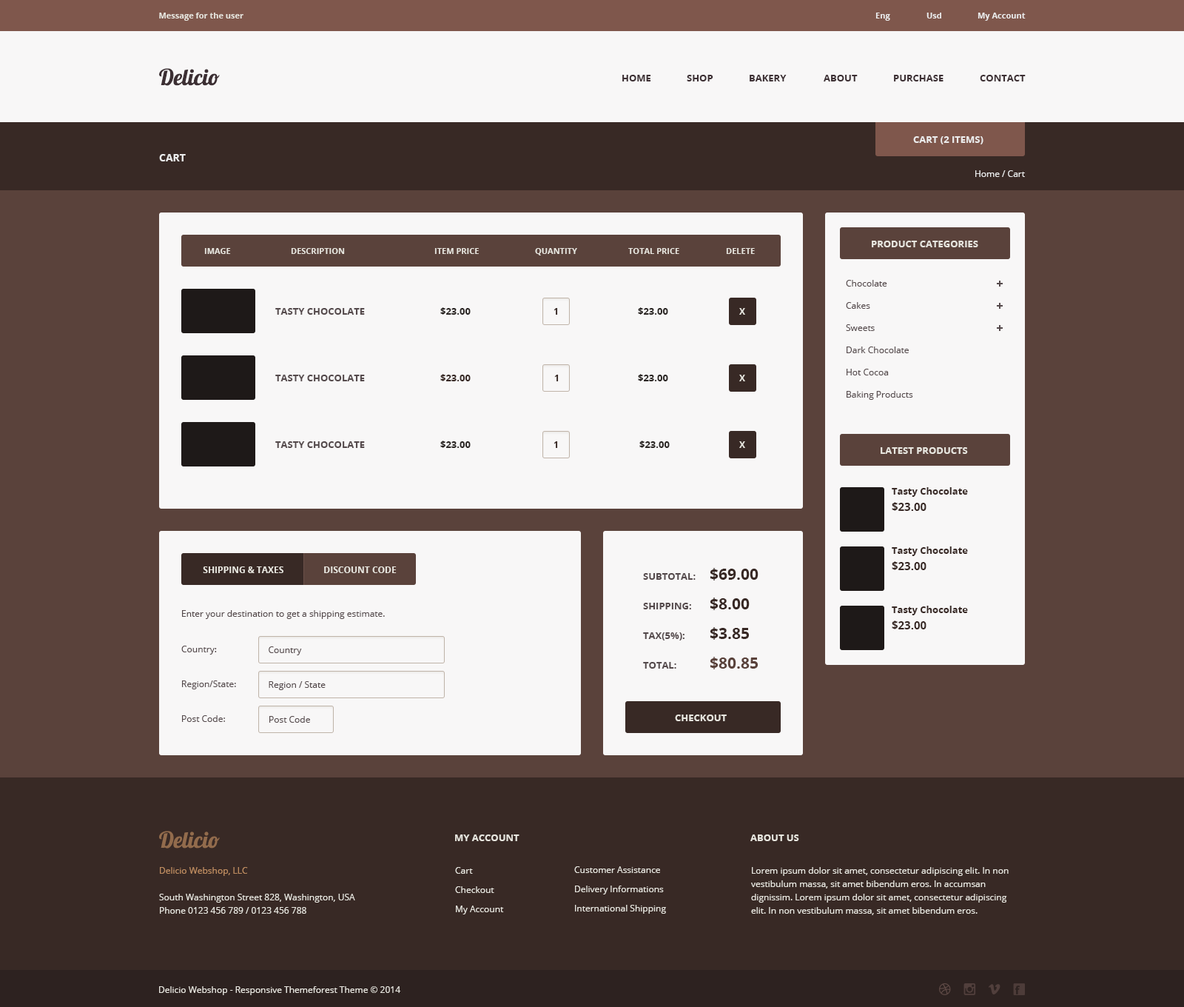
<style>
.page{position:relative;width:1184px;height:1007px;background:#f8f7f7}
.page>*{position:absolute;margin:0}
.t1{font:8.1px "OpenSans-Bold";color:#e7e5de}
.t2{font:8.1px "OpenSans-Bold";color:#ebebeb}
.t3{font:22.2px "Lobster1.4";color:#3c2f33}
.t4{font:9.6px "OpenSans-Bold";color:#3c2f33}
.t5{font:9.6px "OpenSans-Bold";color:#ebebeb}
.t6{font:10.4px "OpenSans-Bold";color:#ebebeb}
.t7{font:8.9px "OpenSans";color:#ebebeb}
.t8{font:9.6px "OpenSans-Bold";color:#e7e5de}
.t9{font:8.9px/22.2px "OpenSans";color:#554a4c}
.t10{font:9.6px "OpenSans-Bold";color:#554a4c}
.t11{font:9.6px "OpenSans-Bold";color:#2a2523}
.t12{font:8.9px "OpenSans-Bold";color:#382925}
.t13{font:8.9px "OpenSans-Bold";color:#e7e5de}
.t14{font:9.6px "OpenSans-Bold";color:#382925}
.t15{font:11.1px "OpenSans-Bold";color:#382925}
.t16{font:15.5px "OpenSans-Bold";color:#382925}
.t17{font:8.9px "OpenSans";color:#554a4c}
.t18{font:8.9px/34.8px "OpenSans";color:#554a4c}
.t19{font:15.5px "OpenSans-Bold";color:#5a423b}
.t20{font:22.2px "Lobster1.4";color:#926b4c}
.t21{font:8.9px/13.3px "OpenSans";color:#e7e5de}
.t22{font:8.9px/13.3px "OpenSans";color:#be8c60}
.t23{font:8.9px/19.2px "OpenSans";color:#e7e5de}
.t24{font:8.9px "OpenSans";color:#e7e5de}
</style>
<div class="page">
<p class="t1" style="left:159px;top:13px;width:85px;height:8px">Message for the user</p>
<p class="t2" style="left:876px;top:13px;width:15px;height:8px">Eng</p>
<p class="t2" style="left:927px;top:13px;width:15px;height:6px">Usd</p>
<p class="t2" style="left:978px;top:13px;width:48px;height:8px">My Account</p>
<p class="t3" style="left:159px;top:68px;width:61px;height:18px">Delicio</p>
<p class="t4" style="left:623px;top:75px;width:28px;height:6px">HOME</p>
<p class="t4" style="left:687px;top:75px;width:27px;height:6px">SHOP</p>
<p class="t4" style="left:750px;top:75px;width:37px;height:6px">BAKERY</p>
<p class="t4" style="left:824px;top:75px;width:34px;height:6px">ABOUT</p>
<p class="t4" style="left:894px;top:75px;width:50px;height:6px">PURCHASE</p>
<p class="t4" style="left:980px;top:75px;width:46px;height:6px">CONTACT</p>
<p class="t5" style="left:913px;top:136px;width:71px;height:8px">CART (2 ITEMS)</p>
<p class="t6" style="left:159px;top:154px;width:27px;height:7px">CART</p>
<p class="t7" style="left:976px;top:170px;width:49px;height:7px">Home / Cart</p>
<p class="t8" style="left:872px;top:241px;width:107px;height:6px">PRODUCT CATEGORIES</p>
<p class="t1" style="left:204px;top:248px;width:27px;height:6px">IMAGE</p>
<p class="t1" style="left:291px;top:248px;width:54px;height:6px">DESCRIPTION</p>
<p class="t1" style="left:435px;top:248px;width:44px;height:6px">ITEM PRICE</p>
<p class="t1" style="left:535px;top:248px;width:42px;height:7px">QUANTITY</p>
<p class="t1" style="left:628px;top:248px;width:52px;height:6px">TOTAL PRICE</p>
<p class="t1" style="left:726px;top:248px;width:29px;height:6px">DELETE</p>
<p class="t9" style="left:846px;top:280px;width:67px;height:120px">Chocolate<br>Cakes<br>Sweets<br>Dark Chocolate<br>Hot Cocoa<br>Baking Products</p>
<p class="t10" style="left:275px;top:308px;width:90px;height:7px">TASTY CHOCOLATE</p>
<p class="t11" style="left:440px;top:307px;width:31px;height:8px">$23.00</p>
<p class="t12" style="left:554px;top:308px;width:4px;height:7px">1</p>
<p class="t11" style="left:638px;top:307px;width:30px;height:8px">$23.00</p>
<p class="t13" style="left:740px;top:308px;width:5px;height:7px">X</p>
<p class="t10" style="left:275px;top:375px;width:90px;height:6px">TASTY CHOCOLATE</p>
<p class="t14" style="left:440px;top:374px;width:31px;height:7px">$23.00</p>
<p class="t12" style="left:554px;top:375px;width:5px;height:6px">1</p>
<p class="t11" style="left:638px;top:374px;width:30px;height:7px">$23.00</p>
<p class="t13" style="left:740px;top:375px;width:5px;height:6px">X</p>
<p class="t10" style="left:275px;top:441px;width:90px;height:7px">TASTY CHOCOLATE</p>
<p class="t11" style="left:440px;top:440px;width:31px;height:8px">$23.00</p>
<p class="t12" style="left:554px;top:441px;width:4px;height:7px">1</p>
<p class="t11" style="left:640px;top:440px;width:30px;height:8px">$23.00</p>
<p class="t13" style="left:740px;top:441px;width:5px;height:7px">X</p>
<p class="t8" style="left:881px;top:447px;width:87px;height:7px">LATEST PRODUCTS</p>
<p class="t14" style="left:892px;top:487px;width:76px;height:10px">Tasty Chocolate</p>
<p class="t15" style="left:892px;top:502px;width:35px;height:9px">$23.00</p>
<p class="t14" style="left:892px;top:546px;width:76px;height:10px">Tasty Chocolate</p>
<p class="t13" style="left:203px;top:566px;width:81px;height:7px">SHIPPING &amp; TAXES</p>
<p class="t13" style="left:324px;top:566px;width:73px;height:7px">DISCOUNT CODE</p>
<p class="t16" style="left:710px;top:568px;width:49px;height:12px">$69.00</p>
<p class="t15" style="left:892px;top:561px;width:35px;height:9px">$23.00</p>
<p class="t10" style="left:643px;top:573px;width:53px;height:7px">SUBTOTAL:</p>
<p class="t10" style="left:643px;top:603px;width:48px;height:6px">SHIPPING:</p>
<p class="t16" style="left:710px;top:597px;width:40px;height:13px">$8.00</p>
<p class="t14" style="left:892px;top:606px;width:76px;height:9px">Tasty Chocolate</p>
<p class="t17" style="left:182px;top:610px;width:203px;height:9px">Enter your destination to get a shipping estimate.</p>
<p class="t16" style="left:710px;top:627px;width:39px;height:13px">$3.85</p>
<p class="t15" style="left:892px;top:620px;width:35px;height:9px">$23.00</p>
<p class="t10" style="left:643px;top:632px;width:42px;height:8px">TAX(5%):</p>
<p class="t18" style="left:181px;top:646px;width:55px;height:76px">Country:<br>Region/State: <br>Post Code:</p>
<p class="t17" style="left:269px;top:646px;width:33px;height:9px">Country</p>
<p class="t10" style="left:643px;top:662px;width:34px;height:6px">TOTAL:</p>
<p class="t19" style="left:710px;top:657px;width:48px;height:12px">$80.85</p>
<p class="t17" style="left:269px;top:681px;width:57px;height:9px">Region / State</p>
<p class="t17" style="left:269px;top:716px;width:41px;height:6px">Post Code</p>
<p class="t8" style="left:675px;top:714px;width:52px;height:7px">CHECKOUT</p>
<p class="t20" style="left:159px;top:831px;width:61px;height:17px">Delicio</p>
<p class="t8" style="left:455px;top:834px;width:65px;height:7px">MY ACCOUNT</p>
<p class="t8" style="left:751px;top:834px;width:48px;height:7px">ABOUT US</p>
<p class="t21" style="left:159px;top:867px;width:196px;height:46px"><span class="t22">Delicio Webshop, LLC<br><br></span>South Washington Street 828, Washington, USA <br>Phone 0123 456 789 / 0123 456 788</p>
<p class="t23" style="left:455px;top:867px;width:49px;height:47px">Cart         <br>Checkout<br>My Account</p>
<p class="t23" style="left:574px;top:866px;width:92px;height:47px">Customer Assistance<br>Delivery Informations<br>International Shipping</p>
<p class="t21" style="left:751px;top:867px;width:258px;height:48px">Lorem ipsum dolor sit amet, consectetur adipiscing elit. In non vestibulum massa, sit amet bibendum eros. In accumsan dignissim. Lorem ipsum dolor sit amet, consectetur adipiscing elit. In non vestibulum massa, sit amet bibendum eros.</p>
<p class="t24" style="left:159px;top:986px;width:241px;height:9px">Delicio Webshop - Responsive Themeforest Theme © 2014</p>
</div>
